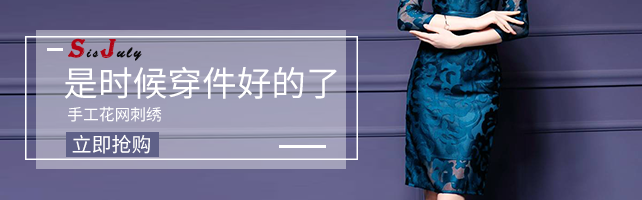
<style>
.page{position:relative;width:642px;height:200px}
.page>*{position:absolute;margin:0}
.t1{font:15.9px "BrushScriptStd";letter-spacing:0.11em;color:#0a0a0a;font-weight:bold}
.t2{font:26.5px "Algerian";letter-spacing:0.11em;color:#b10414;font-weight:bold;font-style:italic}
.t3{font:15.9px "BrushScriptMT";letter-spacing:0.11em;color:#0a0a0a;font-weight:bold}
.t4{font:34.7px "SourceHanSansCN-Regular";color:#ffffff}
.t5{font:16px "SourceHanSansCN-Regular";color:#ffffff}
.t6{font:20px "SourceHanSansCN-Regular";color:#ffffff}
</style>
<div class="page">
<p class="t1" style="left:68px;top:38px;width:74px;height:23px"><span class="t2">S</span><span class="t3">is</span><span class="t2">J</span>uly</p>
<p class="t4" style="left:64px;top:66px;width:273px;height:33px">是时候穿件好的了</p>
<p class="t5" style="left:68px;top:106px;width:94px;height:16px">手工花网刺绣</p>
<p class="t6" style="left:72px;top:134px;width:78px;height:20px">立即抢购</p>
</div>
